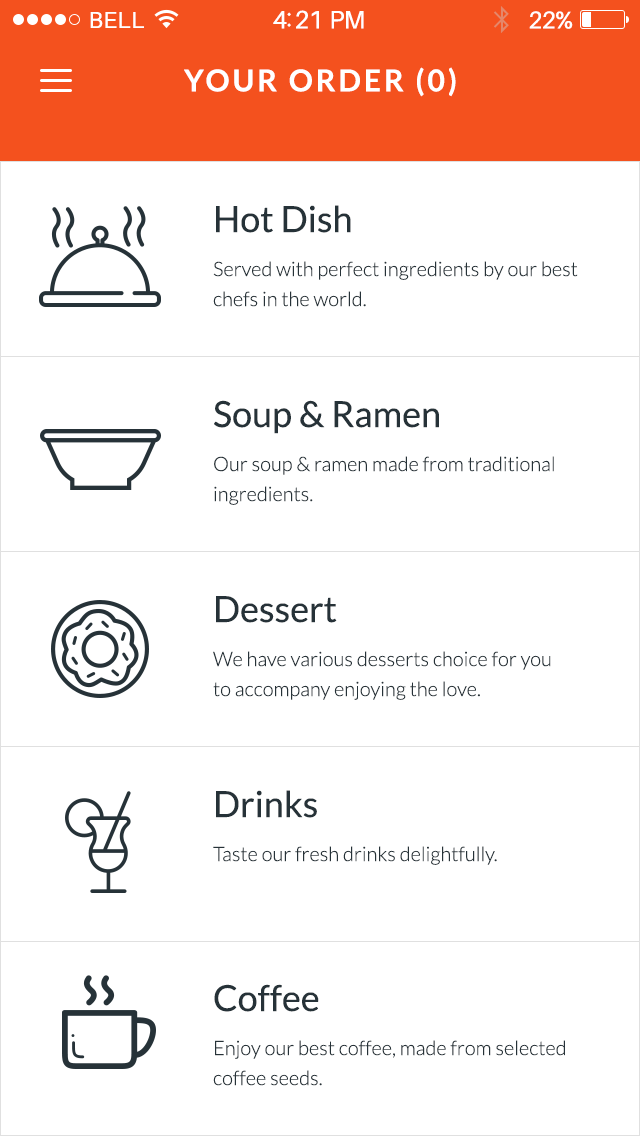
<style>
.page{position:relative;width:640px;height:1136px;background:#ffffff}
.page>*{position:absolute;margin:0}
.t1{font:23px "Aileron-Regular";letter-spacing:0.02em;color:#ffffff}
.t2{font:25px "Aileron-Regular";letter-spacing:-0.02em;color:#ffffff}
.t3{font:24px "Aileron-Regular";letter-spacing:-0.02em;color:#ffffff}
.t4{font:30px "Lato-Bold";letter-spacing:0.1em;color:#ffffff;text-transform:uppercase}
.t5{font:36px "Lato-Regular";color:#263238}
.t6{font:20px/30px "Lato-Light";color:#263238}
.t7{font:20px "Lato-Light";color:#263238}
</style>
<div class="page">
<p class="t1" style="left:90px;top:12px;width:54px;height:16px">BELL</p>
<p class="t2" style="left:273px;top:10px;width:91px;height:19px">4:21 PM</p>
<p class="t3" style="left:529px;top:11px;width:44px;height:18px">22%</p>
<p class="t4" style="left:184px;top:67px;width:272px;height:30px">your order (0)</p>
<p class="t5" style="left:216px;top:205px;width:135px;height:28px">Hot Dish</p>
<p class="t6" style="left:213px;top:261px;width:365px;height:46px">Served with perfect ingredients by our best<br>chefs in the world.</p>
<p class="t5" style="left:214px;top:400px;width:225px;height:34px">Soup &amp; Ramen</p>
<p class="t6" style="left:214px;top:456px;width:340px;height:49px">Our soup &amp; ramen made from traditional<br>ingredients.</p>
<p class="t5" style="left:216px;top:596px;width:121px;height:27px">Dessert</p>
<p class="t6" style="left:213px;top:651px;width:338px;height:49px">We have various desserts choice for you<br>to accompany enjoying the love.</p>
<p class="t5" style="left:216px;top:790px;width:101px;height:28px">Drinks</p>
<p class="t7" style="left:213px;top:846px;width:284px;height:19px">Taste our fresh drinks delightfully.</p>
<p class="t5" style="left:214px;top:984px;width:105px;height:28px">Coffee</p>
<p class="t6" style="left:213px;top:1040px;width:352px;height:46px">Enjoy our best coffee, made from selected<br>coffee seeds.</p>
</div>
